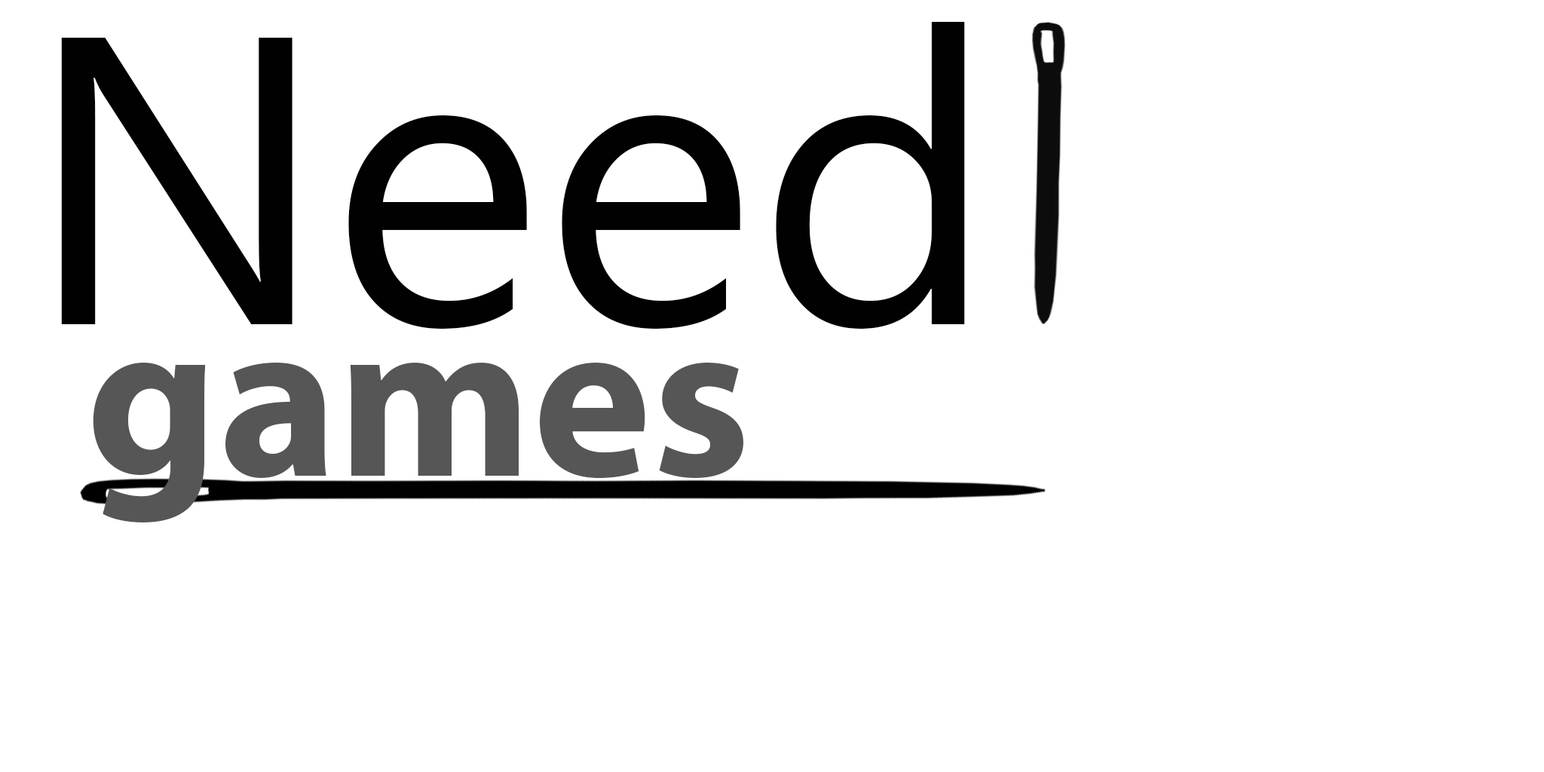
<style>
.page{position:relative;width:1544px;height:772px;background:#ffffff}
.page>*{position:absolute;margin:0}
.t1{font:408.4px "NirmalaUI";color:#010101}
.t2{font:226.2px "MyriadPro-Bold";color:#565656}
</style>
<div class="page">
<p class="t1" style="left:61px;top:22px;width:904px;height:307px">Need</p>
<p class="t2" style="left:93px;top:363px;width:650px;height:160px">games</p>
</div>
